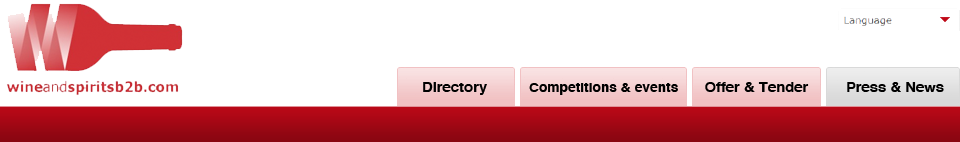
<style>
.page{position:relative;width:960px;height:142px;background:#ffffff}
.page>*{position:absolute;margin:0}
.t1{font:14px "Helvetica-Bold";color:#000000;scale:1.06 1}
.t2{font:13px "Helvetica-Bold";color:#000000;scale:1.06 1}
</style>
<div class="page">
<p class="t1" style="left:423px;top:82px;width:64px;height:13px">Directory</p>
<p class="t2" style="left:529px;top:83px;width:149px;height:12px">Competitions &amp; events</p>
<p class="t1" style="left:705px;top:82px;width:104px;height:10px">Offer &amp; Tender</p>
<p class="t1" style="left:847px;top:82px;width:97px;height:10px">Press &amp; News</p>
</div>
